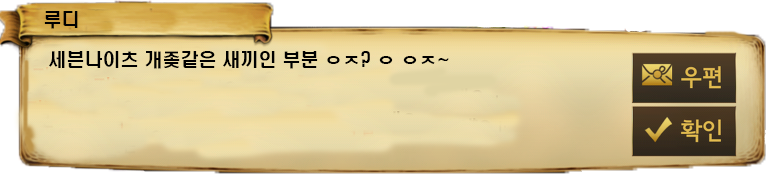
<style>
.page{position:relative;width:782px;height:174px}
.page>*{position:absolute;margin:0}
.t1{font:18px "H2hdrM";color:#000000}
</style>
<div class="page">
<p class="t1" style="left:44px;top:11px;width:34px;height:18px">루디</p>
<p class="t1" style="left:49px;top:51px;width:400px;height:18px">세븐나이츠 개좆같은 새끼인 부분 ㅇㅈ? ㅇ ㅇㅈ~</p>
</div>
